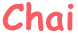
<style>
.page{position:relative;width:78px;height:36px;background:#ffffff}
.page>*{position:absolute;margin:0}
.t1{font:35.9px "ComicSansMS-Bold";color:#f75c63}
</style>
<div class="page">
<p class="t1" style="left:2px;top:2px;width:72px;height:29px">Chai</p>
</div>
